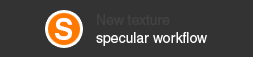
<style>
.page{position:relative;width:253px;height:57px;background:#333333}
.page>*{position:absolute;margin:0}
.t1{font:14px "Helvetica";color:#424242}
.t2{font:29.3px "Helvetica-Bold";color:#ffffff}
.t3{font:14px "Helvetica";color:#ffffff}
</style>
<div class="page">
<p class="t1" style="left:97px;top:14px;width:73px;height:11px">New texture</p>
<p class="t2" style="left:55px;top:18px;width:17px;height:22px">S</p>
<p class="t3" style="left:96px;top:32px;width:111px;height:14px">specular workflow</p>
</div>
